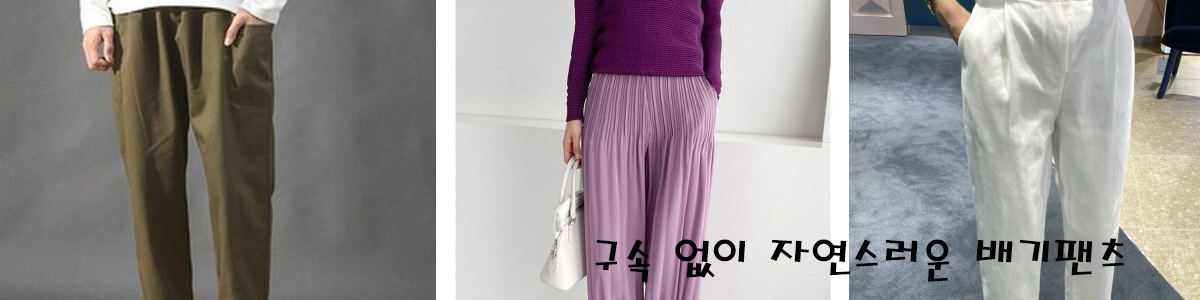
<style>
.page{position:relative;width:1200px;height:300px}
.page>*{position:absolute;margin:0}
.t1{font:48px "MagicR-HM";color:#020202}
</style>
<div class="page">
<p class="t1" style="left:595px;top:238px;width:529px;height:45px">구속 없이 자연스러운 배기팬츠</p>
</div>
